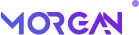
<style>
.page{position:relative;width:139px;height:35px;background:#ffffff}
.page>*{position:absolute;margin:0}
.t1{font:27px "Anurati-Regular";font-weight:bold}
</style>
<div class="page">
<p class="t1" style="left:1px;top:12px;width:121px;height:23px">MORGAN</p>
</div>
